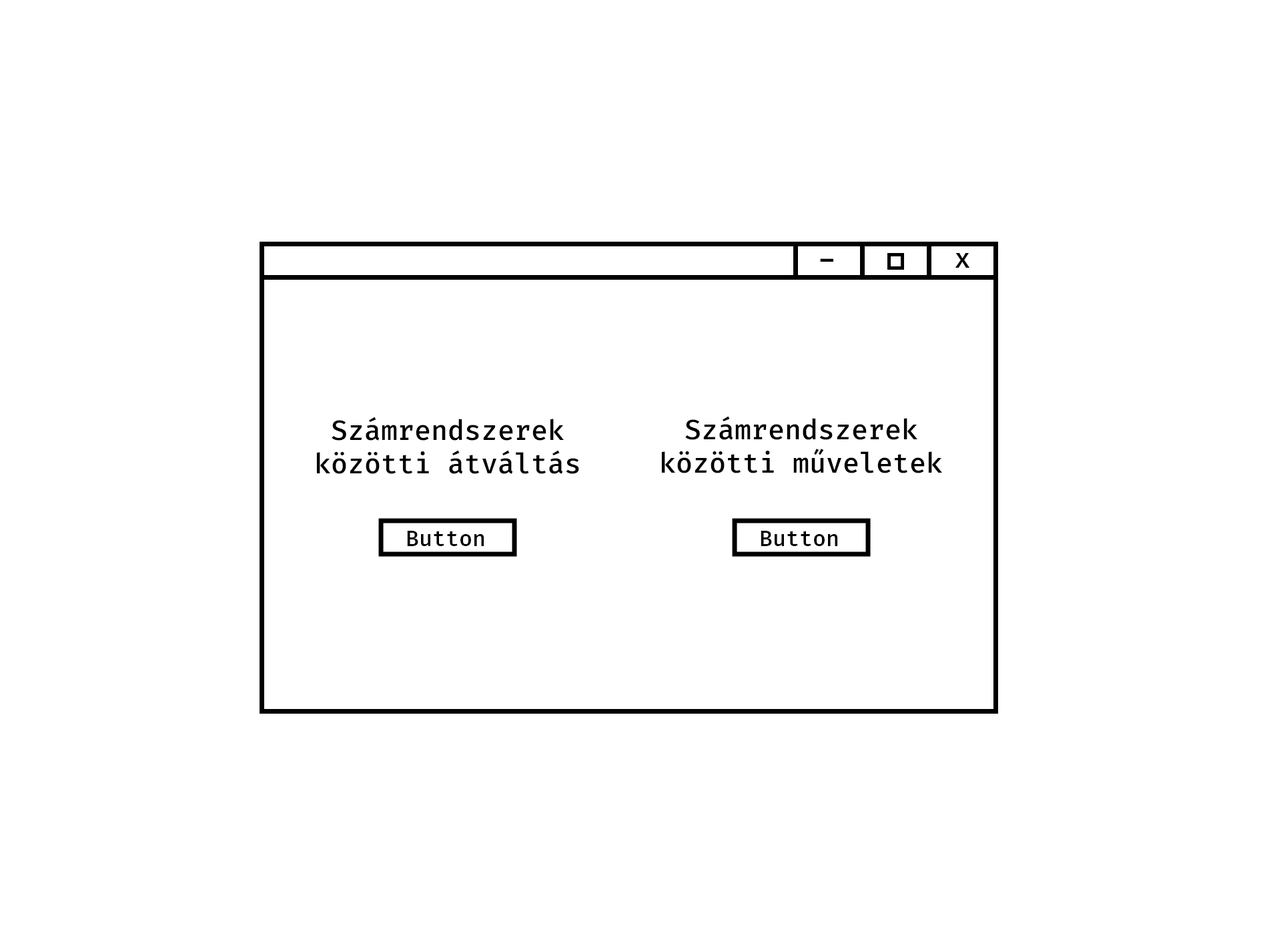
<style>
.page{position:relative;width:1261px;height:946px;background:#ffffff}
.page>*{position:absolute;margin:0}
.t1{font:27.8px "FiraMono-Medium";color:#000000}
.t2{font:36.1px "FiraMono-Medium";color:#000000}
</style>
<div class="page">
<p class="t1" style="left:955px;top:253px;width:15px;height:15px">x</p>
<p class="t2" style="left:820px;top:258px;width:13px;height:4px">-</p>
<p class="t1" style="left:316px;top:416px;width:263px;height:58px;text-align:center">Számrendszerek közötti átváltás</p>
<p class="t1" style="left:661px;top:416px;width:281px;height:57px;text-align:center">Számrendszerek közötti műveletek</p>
</div>
